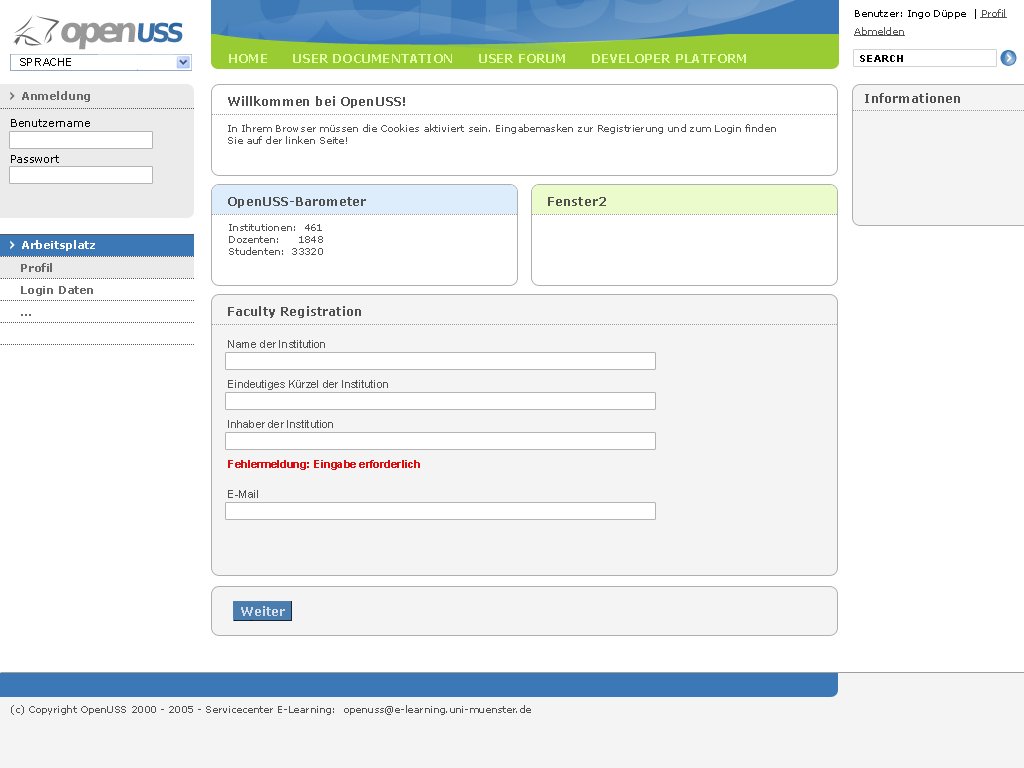
<style>
.page{position:relative;width:1024px;height:768px;background:#ffffff}
.page>*{position:absolute;margin:0}
.t1{font:10px/18px "Verdana";color:#000000}
.t2{font:10px/18px "Verdana";color:#525252;text-decoration:underline}
.t3{font:34.4px "BitstreamVeraSans-Bold";letter-spacing:-0.15em;color:#989898}
.t4{font:34.4px "BitstreamVeraSans-Bold";letter-spacing:-0.08em;color:#989898}
.t5{font:25.8px "BitstreamVeraSans-Bold";letter-spacing:-0.14em;color:#2a649f}
.t6{font:25.8px "BitstreamVeraSans-Bold";letter-spacing:-0.12em;color:#2a649f}
.t7{font:12px "Verdana-Bold";color:#e1ffa5}
.t8{font:11px "ArialMT";color:#000000}
.t9{font:10px "Verdana-Bold";color:#000000}
.t10{font:11px "Verdana-Bold";color:#686868}
.t11{font:12px "Verdana-Bold";color:#505050}
.t12{font:11px/36px "Verdana";color:#000000}
.t13{font:10px "Verdana";color:#505050}
.t14{font:11px "Verdana-Bold";color:#ffffff}
.t15{font:11px/22px "Verdana-Bold";color:#686868}
.t16{font:11px/40px "ArialMT";color:#505050}
.t17{font:11px/40px "Arial-BoldMT";color:#dc0d0d}
.t18{font:11px/30px "ArialMT";color:#505050}
</style>
<div class="page">
<p class="t1" style="left:854px;top:9px;width:153px;height:27px">Benutzer: Ingo Düppe  | <span class="t2">Profil  <br>Abmelden</span></p>
<p class="t3" style="left:61px;top:22px;width:122px;height:28px">ope<span class="t4">n</span><span class="t5">U</span><span class="t6">SS</span></p>
<p class="t7" style="left:229px;top:54px;width:517px;height:9px">HOME      USER DOCUMENTATION      USER FORUM      DEVELOPER PLATFORM</p>
<p class="t8" style="left:20px;top:58px;width:51px;height:8px">SPRACHE</p>
<p class="t9" style="left:860px;top:55px;width:43px;height:7px">SEARCH</p>
<p class="t10" style="left:22px;top:91px;width:68px;height:11px">Anmeldung</p>
<p class="t11" style="left:228px;top:96px;width:177px;height:12px">Willkommen bei OpenUSS!</p>
<p class="t11" style="left:865px;top:93px;width:95px;height:10px">Informationen</p>
<p class="t12" style="left:11px;top:119px;width:79px;height:44px">Benutzername<br>Passwort</p>
<p class="t13" style="left:228px;top:124px;width:548px;height:20px">In Ihrem Browser müssen die Cookies aktiviert sein. Eingabemasken zur Registrierung und zum Login finden <br>Sie auf der linken Seite!</p>
<p class="t11" style="left:228px;top:197px;width:138px;height:11px">OpenUSS-Barometer</p>
<p class="t11" style="left:548px;top:197px;width:58px;height:9px">Fenster2</p>
<p class="t13" style="left:229px;top:224px;width:94px;height:31px">Institutionen:  461<br>Dozenten:     1848<br>Studenten:  33320</p>
<p class="t14" style="left:22px;top:240px;width:73px;height:11px">Arbeitsplatz</p>
<p class="t15" style="left:21px;top:263px;width:72px;height:53px">Profil<br>Login Daten<br>...</p>
<p class="t11" style="left:228px;top:306px;width:133px;height:12px">Faculty Registration</p>
<p class="t16" style="left:228px;top:340px;width:192px;height:158px">Name der Institution<br>Eindeutiges Kürzel der Institution<br>Inhaber der Institution<br><span class="t17">Fehlermeldung: Eingabe erforderlich<br></span><span class="t18">E-Mail</span></p>
<p class="t13" style="left:11px;top:705px;width:520px;height:10px">(c) Copyright OpenUSS 2000 - 2005 - Servicecenter E-Learning:  openuss@e-learning.uni-muenster.de</p>
</div>
